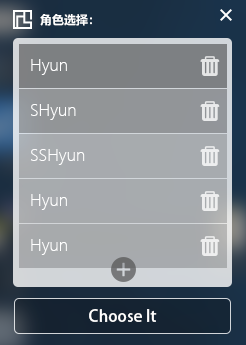
<style>
.page{position:relative;width:246px;height:345px}
.page>*{position:absolute;margin:0}
.t1{font:12px "MicrosoftYaHei-Bold";color:#ffffff}
.t2{font:16px "MicrosoftYaHeiLight";color:#ffffff}
.t3{font:16px "AdobeHeitiStd-Regular";color:#ffffff}
</style>
<div class="page">
<p class="t1" style="left:40px;top:14px;width:52px;height:12px">角色选择：</p>
<p class="t2" style="left:31px;top:59px;width:36px;height:16px">Hyun</p>
<p class="t2" style="left:31px;top:104px;width:45px;height:16px">SHyun</p>
<p class="t2" style="left:31px;top:149px;width:54px;height:16px">SSHyun</p>
<p class="t2" style="left:31px;top:194px;width:36px;height:16px">Hyun</p>
<p class="t2" style="left:31px;top:239px;width:36px;height:16px">Hyun</p>
<p class="t3" style="left:89px;top:309px;width:68px;height:13px">Choose It</p>
</div>
